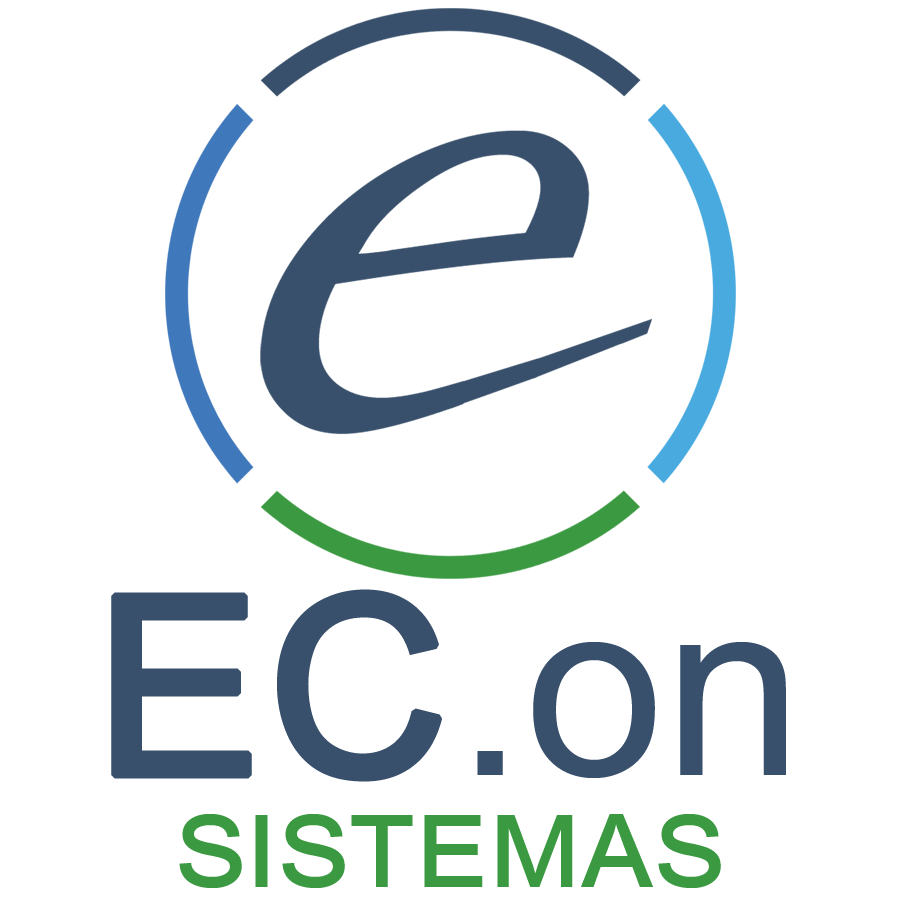
<style>
.page{position:relative;width:900px;height:900px;background:#ffffff}
.page>*{position:absolute;margin:0}
.t1{font:250px "ArialMT";color:#38506b}
.t2{font:250px "ArialMT";color:#38506b;font-weight:bold}
.t3{font:130px "ArialMT";color:#3b9a41;font-variant:small-caps}
</style>
<div class="page">
<p class="t1" style="left:111px;top:589px;width:675px;height:193px"><span class="t2">EC</span>.on</p>
<p class="t3" style="left:179px;top:814px;width:542px;height:74px">sistemas</p>
</div>
